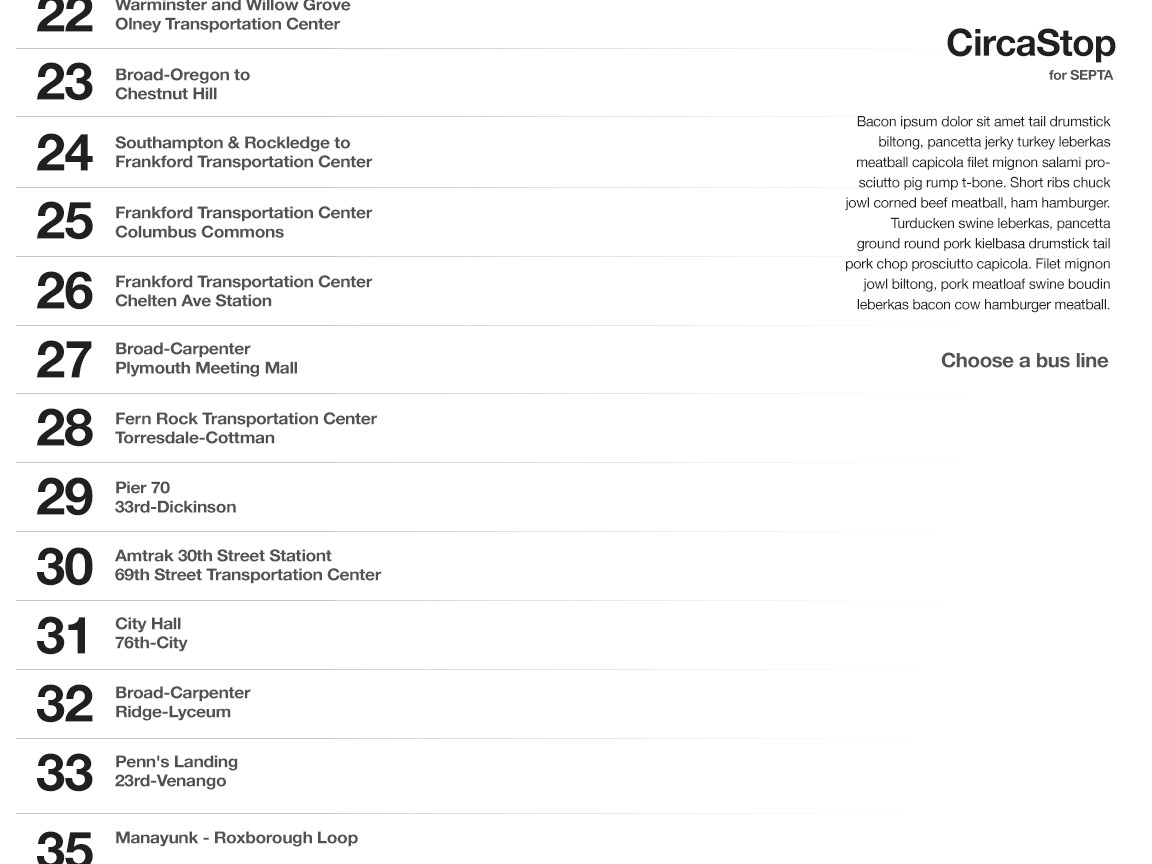
<style>
.page{position:relative;width:1152px;height:864px;background:#ffffff}
.page>*{position:absolute;margin:0}
.t1{font:16.6px/19px "HelveticaNeue-Bold";letter-spacing:-0.02em;color:#525252;scale:1.05 1}
.t2{font:37.4px "HelveticaNeue-Bold";letter-spacing:-0.02em;color:#202020}
.t3{font:51.8px "HelveticaNeue-Bold";letter-spacing:-0.02em;color:#202020}
.t4{font:13.8px "HelveticaNeue-Bold";letter-spacing:-0.02em;color:#525252}
.t5{font:14.3px/20.3px "HelveticaNeue";letter-spacing:-0.02em;color:#202020}
.t6{font:20px "HelveticaNeue-Bold";letter-spacing:-0.02em;color:#525252}
.t7{font:16.6px "HelveticaNeue-Bold";letter-spacing:-0.02em;color:#525252;scale:1.05 1}
</style>
<div class="page">
<p class="t1" style="left:115px;top:0px;width:236px;height:33px">Warminster and Willow Grove <br>Olney Transportation Center</p>
<p class="t2" style="left:947px;top:28px;width:169px;height:35px">CircaStop</p>
<p class="t3" style="left:37px;top:62px;width:56px;height:39px">23</p>
<p class="t1" style="left:115px;top:68px;width:135px;height:32px">Broad-Oregon to <br>Chestnut Hill</p>
<p class="t4" style="left:1049px;top:69px;width:65px;height:11px">for SEPTA</p>
<p class="t5" style="left:845px;top:116px;width:266px;height:197px;text-align:right">Bacon ipsum dolor sit amet tail drumstick biltong, pancetta jerky turkey leberkas meatball capicola filet mignon salami prosciutto pig rump t-bone. Short ribs chuck jowl corned beef meatball, ham hamburger. Turducken swine leberkas, pancetta ground round pork kielbasa drumstick tail pork chop prosciutto capicola. Filet mignon jowl biltong, pork meatloaf swine boudin leberkas bacon cow hamburger meatball.</p>
<p class="t3" style="left:37px;top:133px;width:56px;height:38px">24</p>
<p class="t1" style="left:115px;top:136px;width:258px;height:35px">Southampton &amp; Rockledge to<br>Frankford Transportation Center</p>
<p class="t3" style="left:37px;top:201px;width:56px;height:39px">25</p>
<p class="t1" style="left:115px;top:206px;width:258px;height:32px">Frankford Transportation Center <br>Columbus Commons</p>
<p class="t3" style="left:37px;top:271px;width:56px;height:39px">26</p>
<p class="t1" style="left:115px;top:275px;width:258px;height:32px">Frankford Transportation Center <br>Chelten Ave Station</p>
<p class="t3" style="left:37px;top:340px;width:55px;height:38px">27</p>
<p class="t1" style="left:116px;top:342px;width:181px;height:35px">Broad-Carpenter <br>Plymouth Meeting Mall</p>
<p class="t6" style="left:941px;top:352px;width:168px;height:16px">Choose a bus line</p>
<p class="t3" style="left:37px;top:408px;width:56px;height:39px">28</p>
<p class="t1" style="left:115px;top:412px;width:262px;height:32px">Fern Rock Transportation Center <br>Torresdale-Cottman</p>
<p class="t3" style="left:37px;top:477px;width:56px;height:39px">29</p>
<p class="t1" style="left:115px;top:481px;width:121px;height:32px">Pier 70 <br>33rd-Dickinson</p>
<p class="t3" style="left:37px;top:547px;width:56px;height:39px">30</p>
<p class="t1" style="left:115px;top:549px;width:267px;height:35px">Amtrak 30th Street Stationt<br>69th Street Transportation Center</p>
<p class="t3" style="left:37px;top:616px;width:48px;height:39px">31</p>
<p class="t1" style="left:115px;top:617px;width:73px;height:35px">City Hall <br>76th-City</p>
<p class="t3" style="left:37px;top:684px;width:56px;height:39px">32</p>
<p class="t1" style="left:116px;top:686px;width:135px;height:35px">Broad-Carpenter<br>Ridge-Lyceum</p>
<p class="t3" style="left:37px;top:753px;width:56px;height:39px">33</p>
<p class="t1" style="left:115px;top:755px;width:123px;height:35px">Penn's Landing<br>23rd-Venango</p>
<p class="t7" style="left:116px;top:831px;width:242px;height:16px">Manayunk - Roxborough Loop</p>
</div>
